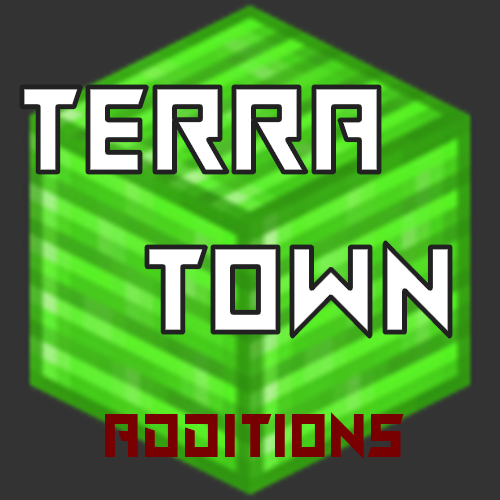
<style>
.page{position:relative;width:500px;height:500px;background:#333333}
.page>*{position:absolute;margin:0}
.t1{font:133.3px "ChasingRabbits";letter-spacing:0.01em;color:#ffffff}
.t2{font:66.7px "ChasingRabbits";letter-spacing:0.01em;color:#780000}
</style>
<div class="page">
<p class="t1" style="left:22px;top:87px;width:428px;height:250px">Terra<br>TOWN</p>
<p class="t2" style="left:105px;top:412px;width:299px;height:47px">Additions</p>
</div>
